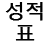
<style>
.page{position:relative;width:50px;height:50px;background:#ffffff}
.page>*{position:absolute;margin:0}
.t1{font:20px "MalgunGothicRegular";color:#000000;font-weight:bold}
</style>
<div class="page">
<p class="t1" style="left:5px;top:2px;width:38px;height:19px">성적</p>
<p class="t1" style="left:15px;top:25px;width:20px;height:16px">표</p>
</div>
